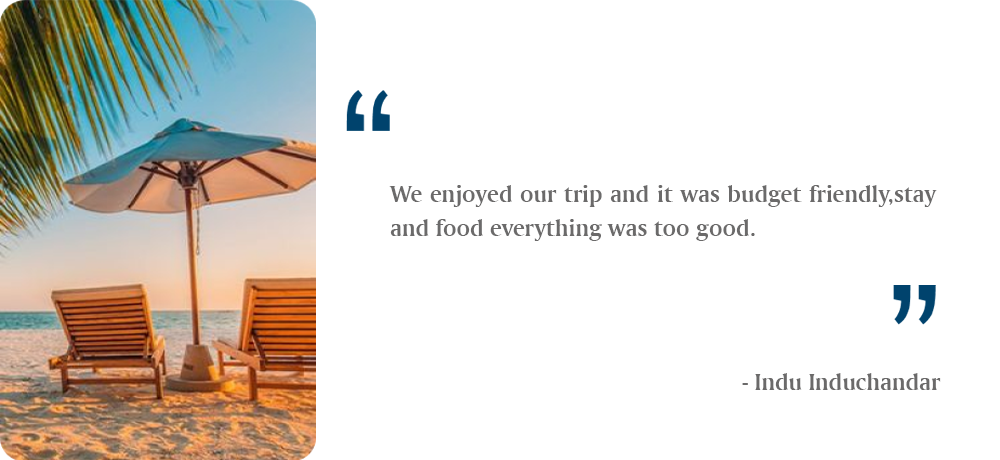
<style>
.page{position:relative;width:1000px;height:460px;background:#ffffff}
.page>*{position:absolute;margin:0}
.t1{font:25px/33.3px "AmerigoBT-BoldA";color:#6b6a6a}
.t2{font:25px "AmerigoBT-BoldA";color:#6b6a6a}
</style>
<div class="page">
<p class="t1" style="left:389px;top:185px;width:548px;height:56px;text-align:justify">We enjoyed our trip and it was budget friendly,stay and food everything was too good.</p>
<p class="t2" style="left:742px;top:373px;width:199px;height:17px">- Indu Induchandar</p>
</div>
